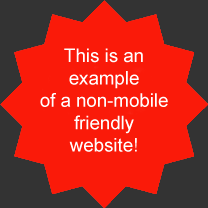
<style>
.page{position:relative;width:208px;height:208px;background:#fa1a09}
.page>*{position:absolute;margin:0}
.t1{font:18.7px "ArialMT";color:#ffffff}
</style>
<div class="page">
<p class="t1" style="left:40px;top:48px;width:128px;height:104px;text-align:center">This is an<br>example<br>of a non-mobile<br>friendly<br>website!</p>
</div>
